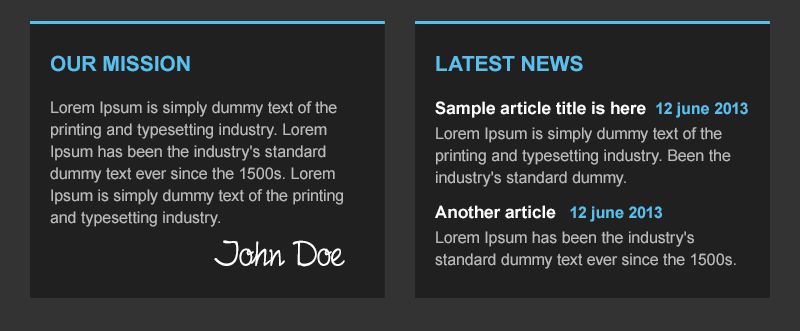
<style>
.page{position:relative;width:800px;height:331px;background:#202020}
.page>*{position:absolute;margin:0}
.t1{font:21px "Arial-BoldMT";color:#5abfeb;text-transform:uppercase}
.t2{font:16px/22px "ArialMT";color:#bababa}
.t3{font:17px/20px "Arial-BoldMT";color:#ffffff}
.t4{font:16px/20px "Arial-BoldMT";color:#5abfeb}
.t5{font:16px/25px "Arial-BoldMT";color:#5abfeb}
.t6{font:16px/25px "ArialMT";color:#bababa}
.t7{font:16px/20px "ArialMT";color:#bababa}
.t8{font:17px/35px "Arial-BoldMT";color:#ffffff}
.t9{font:40px "FinelinerScript";color:#ffffff}
</style>
<div class="page">
<p class="t1" style="left:51px;top:55px;width:139px;height:17px">OUR MISSION</p>
<p class="t1" style="left:436px;top:55px;width:147px;height:17px">Latest news</p>
<p class="t2" style="left:50px;top:101px;width:293px;height:126px">Lorem Ipsum is simply dummy text of the printing and typesetting industry. Lorem Ipsum has been the industry's standard dummy text ever since the 1500s. Lorem Ipsum is simply dummy text of the printing and typesetting industry.</p>
<p class="t2" style="left:435px;top:101px;width:313px;height:168px"><span class="t3">Sample article title is here  </span><span class="t4">12 june 201</span><span class="t5">3<br></span><span class="t6">Lorem Ipsum is sim</span><span class="t7">ply dummy te</span>xt of the printing and typesetting industry. Been the industry's standard dummy.<br><span class="t8">Another article   </span><span class="t4">12 june 201</span><span class="t5">3<br></span><span class="t6">Lorem</span><span class="t7"> Ipsum has been the indu</span>stry's standard dummy text ever since the 1500s.</p>
<p class="t9" style="left:214px;top:240px;width:131px;height:27px">John Doe</p>
</div>
